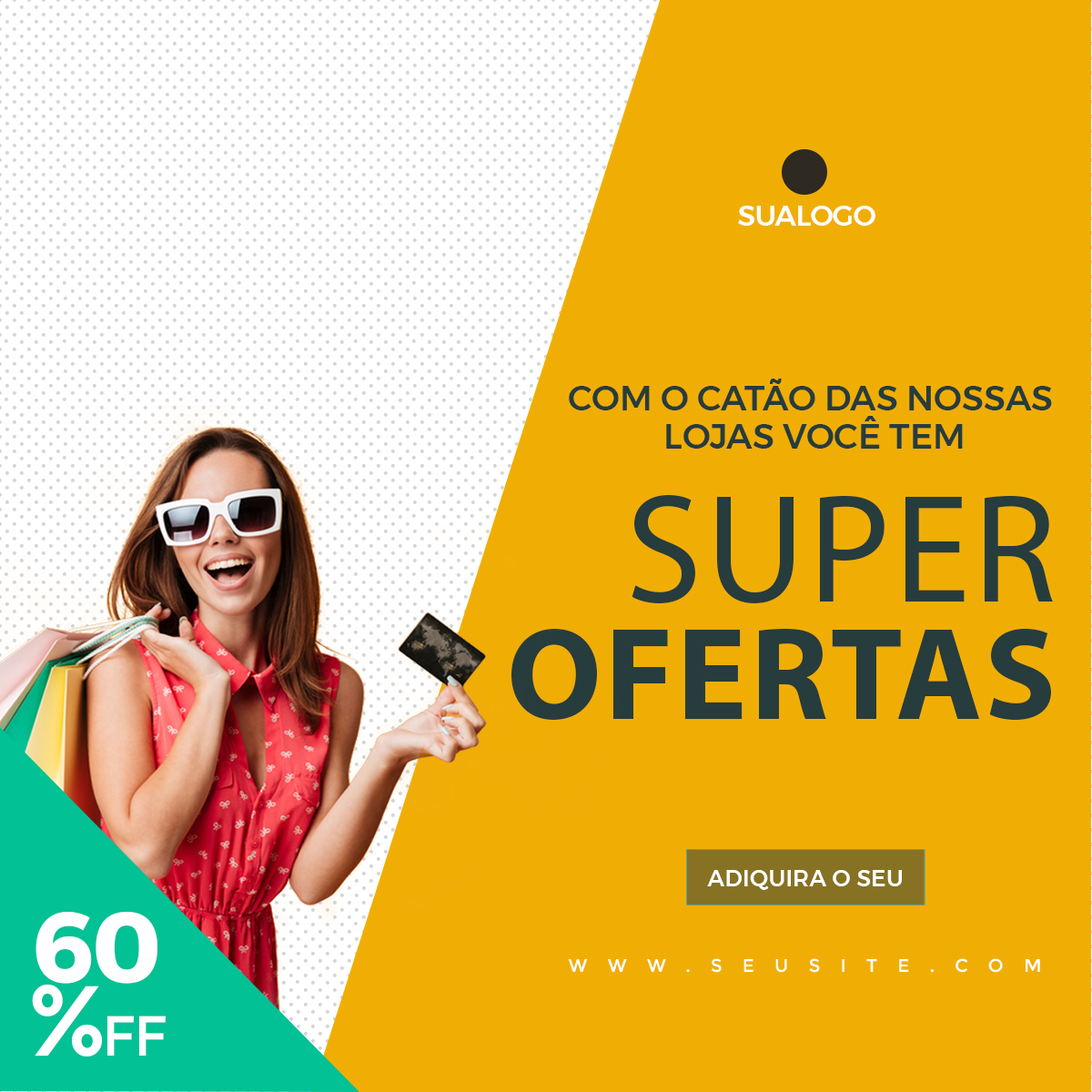
<style>
.page{position:relative;width:1092px;height:1092px;background:#f0ae05}
.page>*{position:absolute;margin:0}
.t1{font:29.3px "Montserrat-Medium";letter-spacing:-0.02em;color:#ffffff;text-transform:uppercase}
.t2{font:34.6px/38.2px "Montserrat-Medium";color:#273c3c;text-transform:uppercase}
.t3{font:131.9px/117.4px "MyriadPro-Bold";color:#273c3c;text-transform:uppercase}
.t4{font:154.7px/117.4px "MyriadPro-Regular";color:#273c3c;text-transform:uppercase}
.t5{font:22.7px "Montserrat-Medium";letter-spacing:0.01em;color:#ffffff;text-transform:uppercase}
.t6{font:99px/72.2px "Montserrat-Bold";letter-spacing:-0.04em;color:#ffffff;text-transform:uppercase}
.t7{font:99px/72.2px "Montserrat-Regular";letter-spacing:-0.04em;color:#ffffff;text-transform:uppercase}
.t8{font:56.4px/72.2px "Montserrat-Regular";letter-spacing:-0.04em;color:#ffffff;text-transform:uppercase}
.t9{font:18.2px "Montserrat-Regular";letter-spacing:1.1em;color:#fefefb}
</style>
<div class="page">
<p class="t1" style="left:738px;top:206px;width:137px;height:20px">SUALOGO</p>
<p class="t2" style="left:569px;top:379px;width:483px;height:70px;text-align:center">com o catão das nossas<br> lojas você tem</p>
<p class="t3" style="left:511px;top:495px;width:542px;height:226px;text-align:right"><span class="t4">Super<br></span>ofertas</p>
<p class="t5" style="left:707px;top:870px;width:195px;height:20px">adiquira o seu</p>
<p class="t6" style="left:32px;top:912px;width:134px;height:144px;text-align:center">60<br><span class="t7">%</span><span class="t8">ff</span></p>
<p class="t9" style="left:568px;top:958px;width:472px;height:15px">WWW.SEUSITE.COM</p>
</div>
